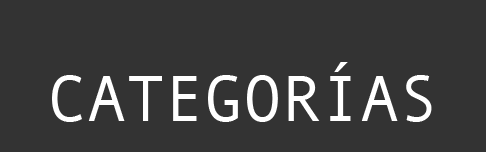
<style>
.page{position:relative;width:486px;height:152px;background:#333333}
.page>*{position:absolute;margin:0}
.t1{font:65px "AndaleMono";color:#ffffff}
</style>
<div class="page">
<p class="t1" style="left:52px;top:62px;width:380px;height:60px">CATEGORÍAS</p>
</div>
